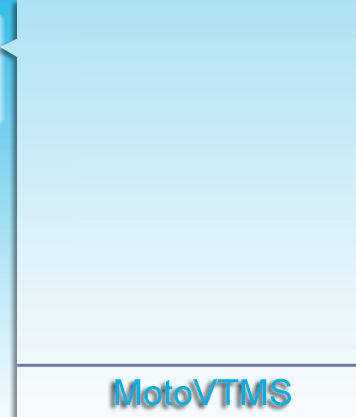
<style>
.page{position:relative;width:356px;height:417px}
.page>*{position:absolute;margin:0}
.t1{font:36px "ArialMT";color:#0cade1}
</style>
<div class="page">
<p class="t1" style="left:115px;top:378px;width:176px;height:28px">MotoVTMS</p>
</div>
